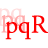
<style>
.page{position:relative;width:48px;height:48px;background:#ffffff}
.page>*{position:absolute;margin:0}
.t1{font:25.5px "AGaramondPro-Regular";color:#ff0000}
</style>
<div class="page">
<p class="t1" style="left:5px;top:15px;width:44px;height:25px">pqR</p>
</div>
